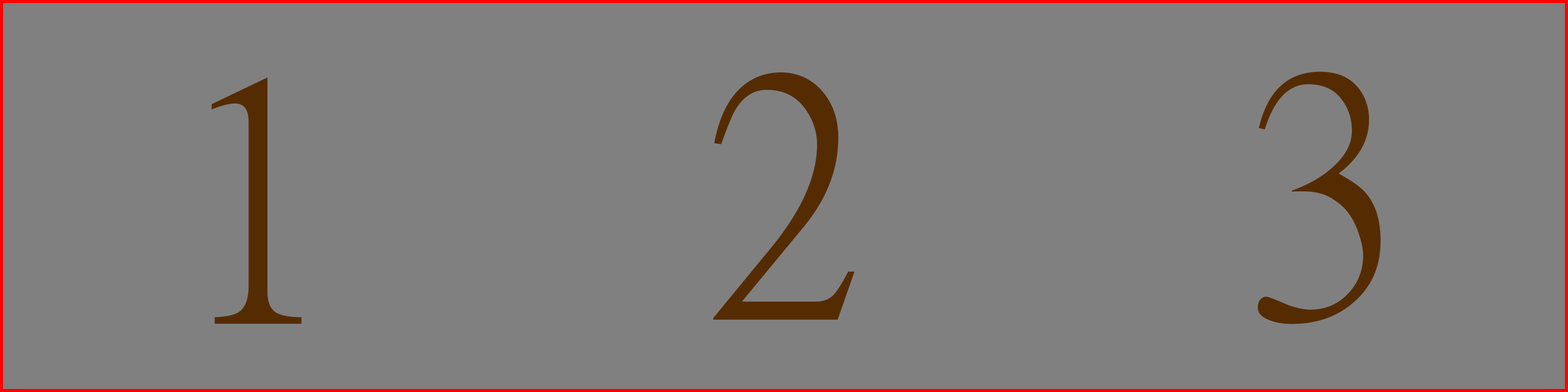
<style>
.page{position:relative;width:1568px;height:392px;background:#808080}
.page>*{position:absolute;margin:0}
.t1{font:337.2px "MingLiU";color:#552c02}
</style>
<div class="page">
<p class="t1" style="left:211px;top:77px;width:91px;height:247px">1</p>
<p class="t1" style="left:713px;top:72px;width:142px;height:248px">2</p>
<p class="t1" style="left:1258px;top:71px;width:123px;height:253px">3</p>
</div>
